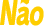
<style>
.page{position:relative;width:44px;height:26px;background:#fecd00}
.page>*{position:absolute;margin:0}
.t1{font:32px "RodinPro-EB";letter-spacing:-0.044em;color:#fecd00;font-style:italic;scale:0.72 1}
</style>
<div class="page">
<p class="t1" style="left:0px;top:0px;width:44px;height:26px">Não</p>
</div>
